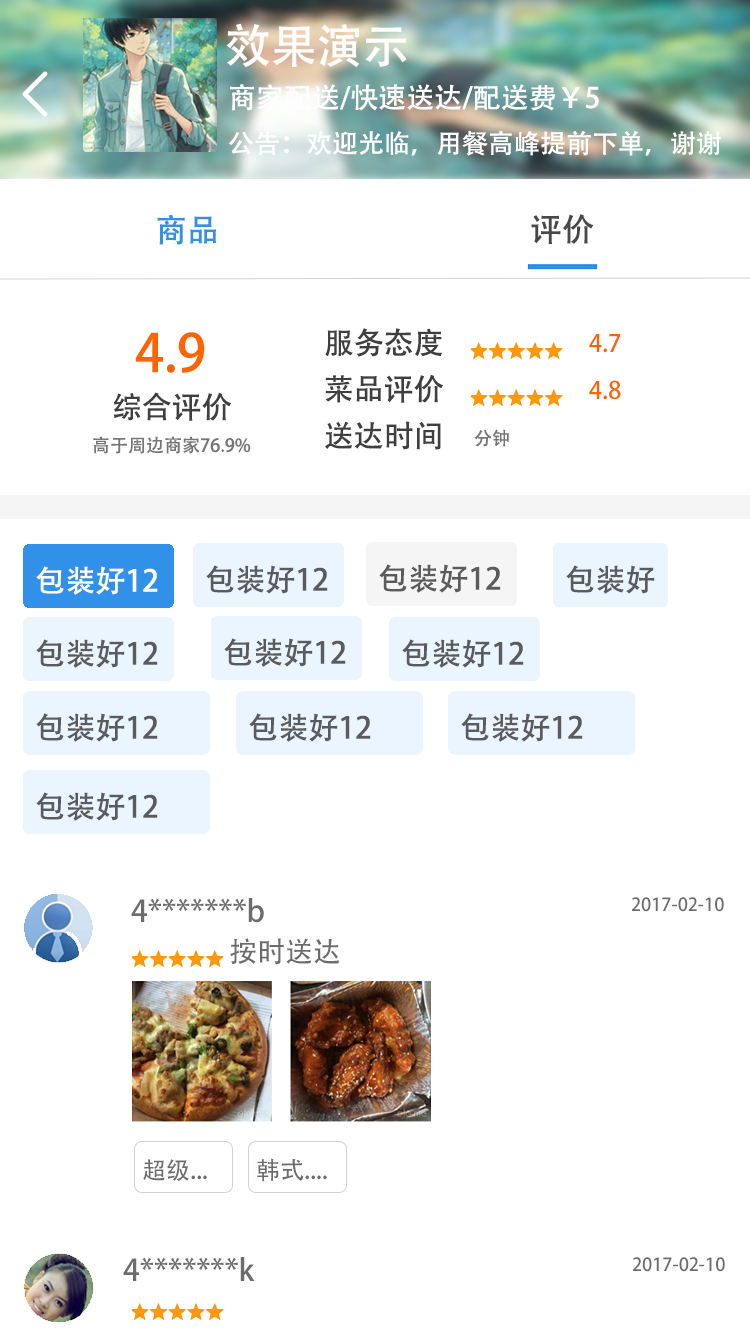
<style>
.page{position:relative;width:750px;height:1334px;background:#ffffff}
.page>*{position:absolute;margin:0}
.t1{font:46px "AdobeHeitiStd-Regular";color:#fffefe}
.t2{font:28px "AdobeHeitiStd-Regular";color:#fffefe}
.t3{font:26px "AdobeHeitiStd-Regular";color:#fffefe}
.t4{font:32px "AdobeHeitiStd-Regular";color:#3191e8}
.t5{font:32px "AdobeHeitiStd-Regular";color:#474848}
.t6{font:30px "AdobeHeitiStd-Regular";color:#3f3f3f}
.t7{font:52px "AdobeHeitiStd-Regular";color:#ff6400}
.t8{font:24px "AdobeHeitiStd-Regular";color:#ff6400}
.t9{font:18px "AdobeHeitiStd-Regular";color:#777676}
.t10{font:30px "AdobeHeitiStd-Regular";color:#ffffff}
.t11{font:30px "AdobeHeitiStd-Regular";color:#5a5b5c}
.t12{font:30px "AdobeHeitiStd-Regular";color:#6d6c6c}
.t13{font:18px "AdobeHeitiStd-Regular";color:#6d6c6c}
.t14{font:28px "AdobeHeitiStd-Regular";color:#6d6c6c}
.t15{font:24px "AdobeHeitiStd-Regular";color:#6d6c6c}
</style>
<div class="page">
<p class="t1" style="left:226px;top:23px;width:181px;height:45px">效果演示</p>
<p class="t2" style="left:230px;top:84px;width:369px;height:27px">商家配送/快速送达/配送费￥5</p>
<p class="t3" style="left:228px;top:131px;width:493px;height:25px">公告：欢迎光临，用餐高峰提前下单，谢谢</p>
<p class="t4" style="left:157px;top:214px;width:59px;height:31px">商品</p>
<p class="t5" style="left:531px;top:214px;width:63px;height:30px">评价</p>
<p class="t6" style="left:325px;top:328px;width:118px;height:29px">服务态度</p>
<p class="t7" style="left:135px;top:332px;width:70px;height:41px">4.9</p>
<p class="t8" style="left:589px;top:334px;width:32px;height:19px">4.7</p>
<p class="t6" style="left:325px;top:374px;width:118px;height:29px">菜品评价</p>
<p class="t8" style="left:589px;top:380px;width:32px;height:20px">4.8</p>
<p class="t6" style="left:113px;top:392px;width:118px;height:29px">综合评价</p>
<p class="t6" style="left:325px;top:421px;width:116px;height:29px">送达时间</p>
<p class="t9" style="left:93px;top:436px;width:158px;height:18px">高于周边商家76.9%</p>
<p class="t9" style="left:474px;top:429px;width:35px;height:18px">分钟</p>
<p class="t10" style="left:36px;top:566px;width:122px;height:29px">包装好12</p>
<p class="t11" style="left:206px;top:565px;width:122px;height:29px">包装好12</p>
<p class="t11" style="left:379px;top:564px;width:122px;height:29px">包装好12</p>
<p class="t11" style="left:566px;top:565px;width:89px;height:29px">包装好</p>
<p class="t11" style="left:36px;top:639px;width:122px;height:29px">包装好12</p>
<p class="t11" style="left:224px;top:638px;width:122px;height:29px">包装好12</p>
<p class="t11" style="left:402px;top:639px;width:122px;height:29px">包装好12</p>
<p class="t11" style="left:36px;top:713px;width:122px;height:29px">包装好12</p>
<p class="t11" style="left:249px;top:713px;width:122px;height:29px">包装好12</p>
<p class="t11" style="left:461px;top:713px;width:122px;height:29px">包装好12</p>
<p class="t11" style="left:36px;top:792px;width:122px;height:29px">包装好12</p>
<p class="t12" style="left:131px;top:898px;width:133px;height:25px">4*******b</p>
<p class="t13" style="left:632px;top:897px;width:92px;height:15px">2017-02-10</p>
<p class="t14" style="left:230px;top:938px;width:110px;height:27px">按时送达</p>
<p class="t15" style="left:257px;top:1158px;width:70px;height:24px">韩式....</p>
<p class="t15" style="left:143px;top:1159px;width:64px;height:22px">超级...</p>
<p class="t12" style="left:123px;top:1257px;width:132px;height:24px">4*******k</p>
<p class="t13" style="left:633px;top:1257px;width:92px;height:15px">2017-02-10</p>
</div>
